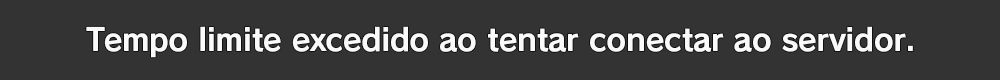
<style>
.page{position:relative;width:1000px;height:80px;background:#333333}
.page>*{position:absolute;margin:0}
.t1{font:30.7px "RodinPro-B";letter-spacing:-0.013em;color:#fbfafb}
</style>
<div class="page">
<p class="t1" style="left:86px;top:26px;width:827px;height:32px">Tempo limite excedido ao tentar conectar ao servidor.</p>
</div>
